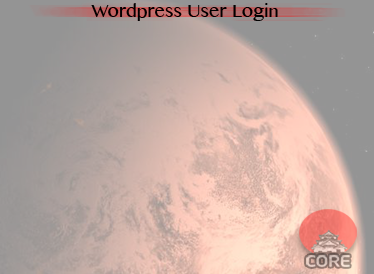
<style>
.page{position:relative;width:374px;height:274px}
.page>*{position:absolute;margin:0}
.t1{font:18px "GurmukhiMN";color:#000000}
</style>
<div class="page">
<p class="t1" style="left:91px;top:3px;width:187px;height:18px">Wordpress User Login</p>
</div>
